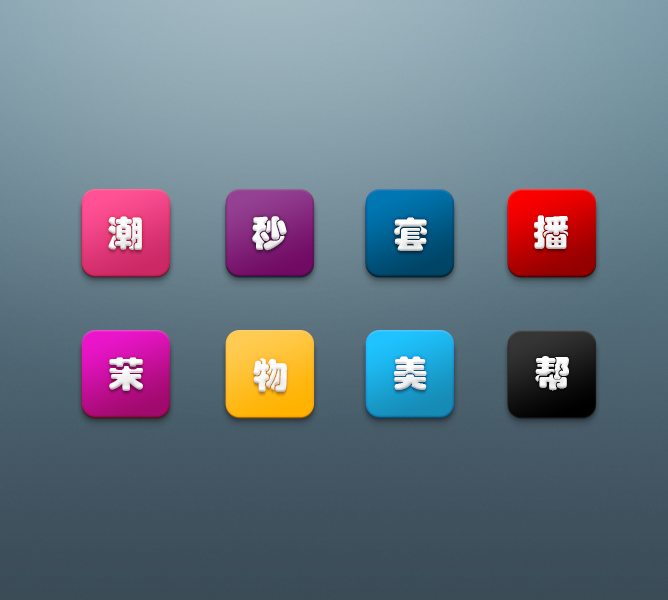
<style>
.page{position:relative;width:668px;height:600px}
.page>*{position:absolute;margin:0}
.t1{font:36px "STHupo";color:#ffffff}
</style>
<div class="page">
<p class="t1" style="left:108px;top:216px;width:34px;height:34px">潮</p>
<p class="t1" style="left:108px;top:216px;width:34px;height:34px">潮</p>
<p class="t1" style="left:252px;top:216px;width:35px;height:35px">秒</p>
<p class="t1" style="left:252px;top:216px;width:35px;height:35px">秒</p>
<p class="t1" style="left:394px;top:217px;width:33px;height:34px">套</p>
<p class="t1" style="left:394px;top:217px;width:33px;height:34px">套</p>
<p class="t1" style="left:534px;top:215px;width:35px;height:34px">播</p>
<p class="t1" style="left:534px;top:215px;width:35px;height:34px">播</p>
<p class="t1" style="left:109px;top:357px;width:34px;height:34px">茉</p>
<p class="t1" style="left:109px;top:357px;width:34px;height:34px">茉</p>
<p class="t1" style="left:253px;top:358px;width:34px;height:34px">物</p>
<p class="t1" style="left:253px;top:358px;width:34px;height:34px">物</p>
<p class="t1" style="left:394px;top:356px;width:33px;height:34px">美</p>
<p class="t1" style="left:394px;top:356px;width:33px;height:34px">美</p>
<p class="t1" style="left:535px;top:356px;width:34px;height:35px">帮</p>
<p class="t1" style="left:535px;top:356px;width:34px;height:35px">帮</p>
</div>
